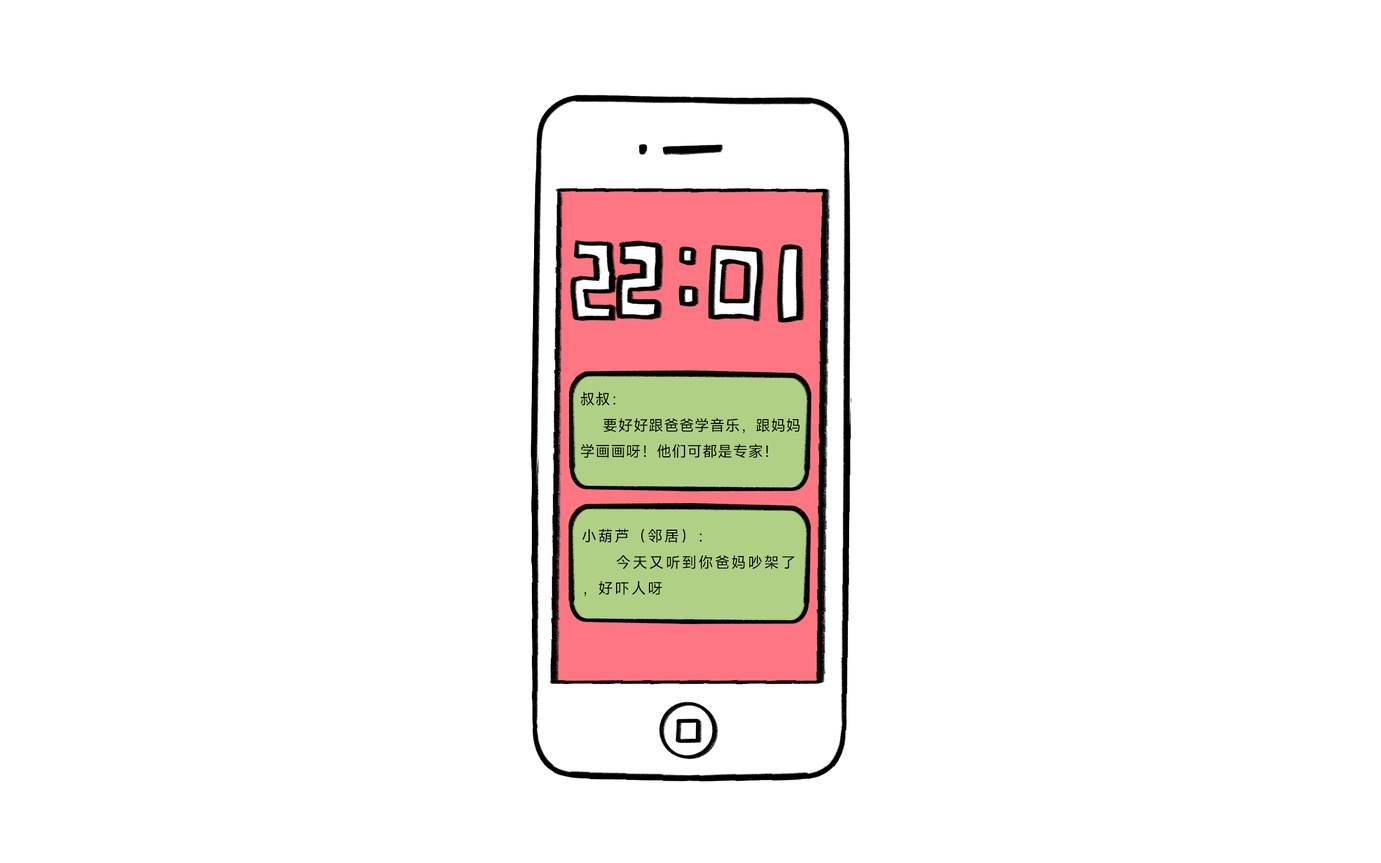
<style>
.page{position:relative;width:1381px;height:863px;background:#ffffff}
.page>*{position:absolute;margin:0}
.t1{font:15px "MiSans-Regular";letter-spacing:0.02em;color:#000000}
.t2{font:15px "MiSans-Regular";letter-spacing:0.1em;color:#000000}
</style>
<div class="page">
<p class="t1" style="left:581px;top:392px;width:219px;height:67px">叔叔：<br>    要好好跟爸爸学音乐，跟妈妈学画画呀！他们可都是专家！</p>
<p class="t2" style="left:582px;top:529px;width:212px;height:68px">小葫芦（邻居）：<br>     今天又听到你爸妈吵架了，好吓人呀</p>
</div>
